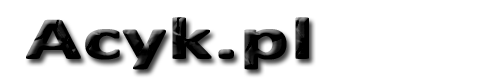
<style>
.page{position:relative;width:500px;height:80px;background:#ffffff}
.page>*{position:absolute;margin:0}
.t1{font:60px "Calibri-Bold";color:#000000;font-weight:bold;scale:1.5 1}
</style>
<div class="page">
<p class="t1" style="left:26px;top:17px;width:283px;height:53px">Acyk.pl</p>
</div>
